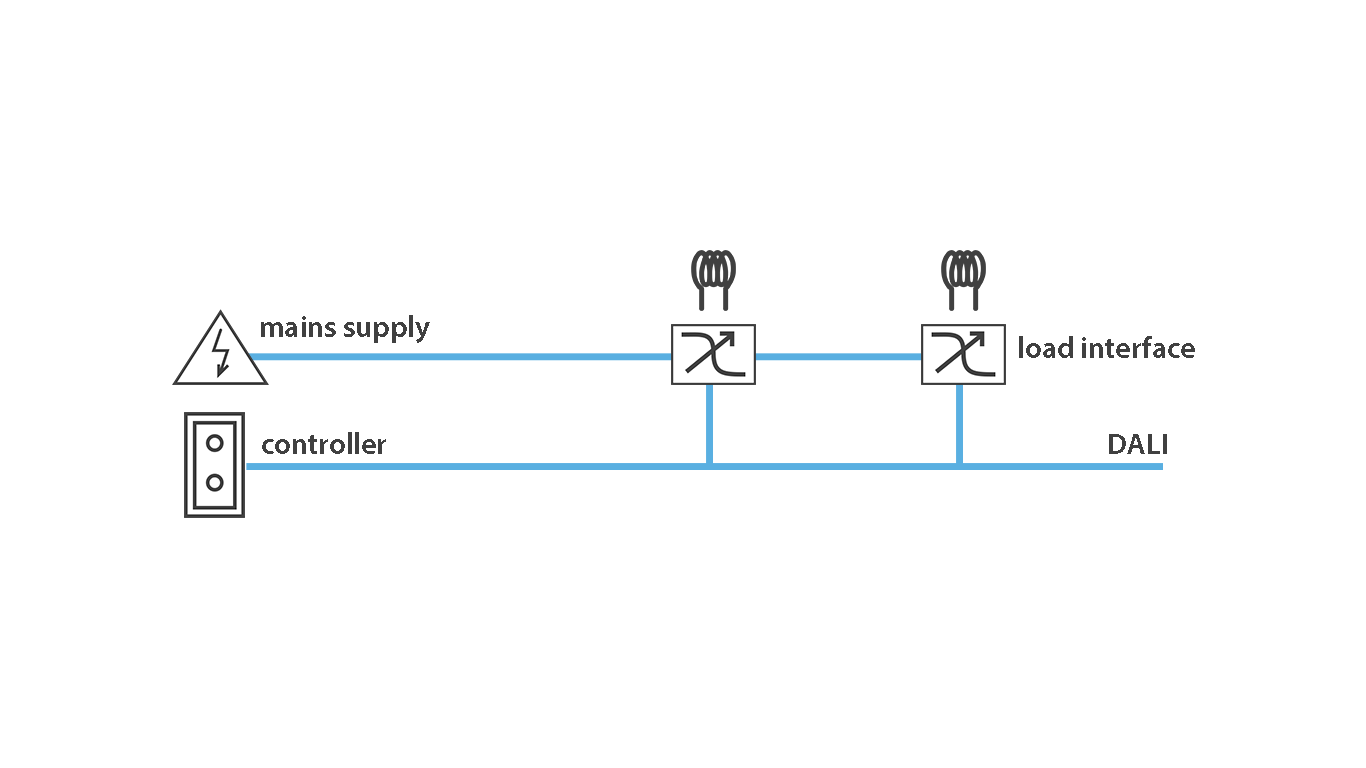
<style>
.page{position:relative;width:1366px;height:768px;background:#ffffff}
.page>*{position:absolute;margin:0}
.t1{font:29.8px "MyriadPro-Semibold";color:#404040}
</style>
<div class="page">
<p class="t1" style="left:261px;top:315px;width:169px;height:28px">mains supply</p>
<p class="t1" style="left:1019px;top:336px;width:176px;height:22px">load interface</p>
<p class="t1" style="left:262px;top:432px;width:124px;height:22px">controller</p>
<p class="t1" style="left:1109px;top:434px;width:58px;height:20px">DALI</p>
</div>
